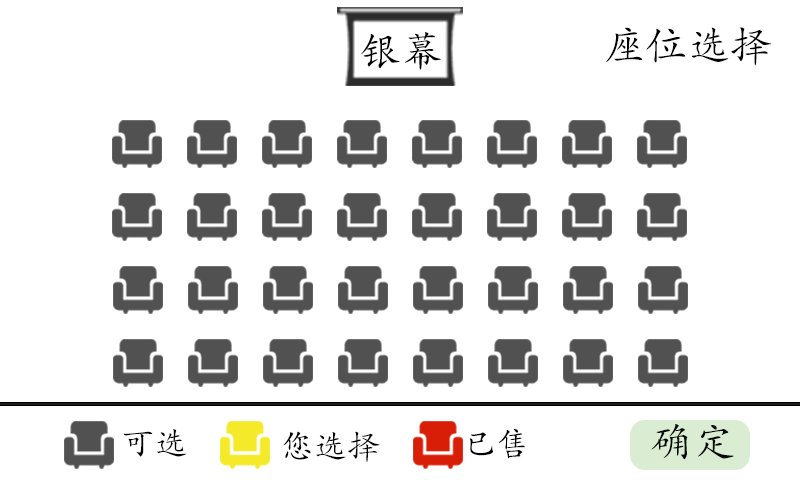
<style>
.page{position:relative;width:800px;height:480px;background:#ffffff}
.page>*{position:absolute;margin:0}
.t1{font:41.7px "STKaiti";color:#000000}
.t2{font:41.7px "STKaiti";color:#070707}
.t3{font:33.3px "STKaiti";color:#000000}
</style>
<div class="page">
<p class="t1" style="left:606px;top:27px;width:165px;height:39px">座位选择</p>
<p class="t1" style="left:361px;top:32px;width:80px;height:38px">银幕</p>
<p class="t2" style="left:651px;top:424px;width:83px;height:36px">确定</p>
<p class="t3" style="left:123px;top:429px;width:64px;height:28px">可选</p>
<p class="t3" style="left:283px;top:431px;width:97px;height:32px">您选择</p>
<p class="t3" style="left:469px;top:429px;width:56px;height:30px">已售</p>
</div>
